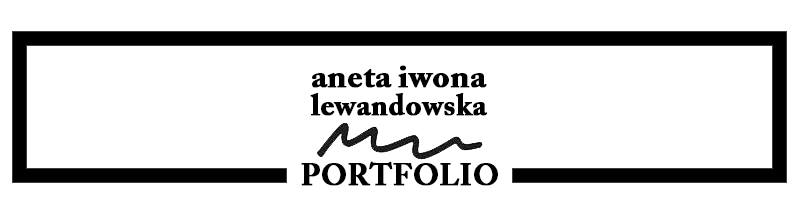
<style>
.page{position:relative;width:800px;height:205px;background:#ffffff}
.page>*{position:absolute;margin:0}
.t1{font:33px/28px "ACaslonPro-Bold";color:#000000;font-weight:bold}
.t2{font:30px/28px "ACaslonPro-Bold";color:#000000;font-weight:bold}
.t3{font:30px "ACaslonPro-Bold";color:#000000;font-weight:bold}
</style>
<div class="page">
<p class="t1" style="left:310px;top:65px;width:178px;height:51px;text-align:center">aneta iwona<br><span class="t2">lewandowska</span></p>
<p class="t3" style="left:301px;top:161px;width:197px;height:25px">PORTFOLIO</p>
</div>
